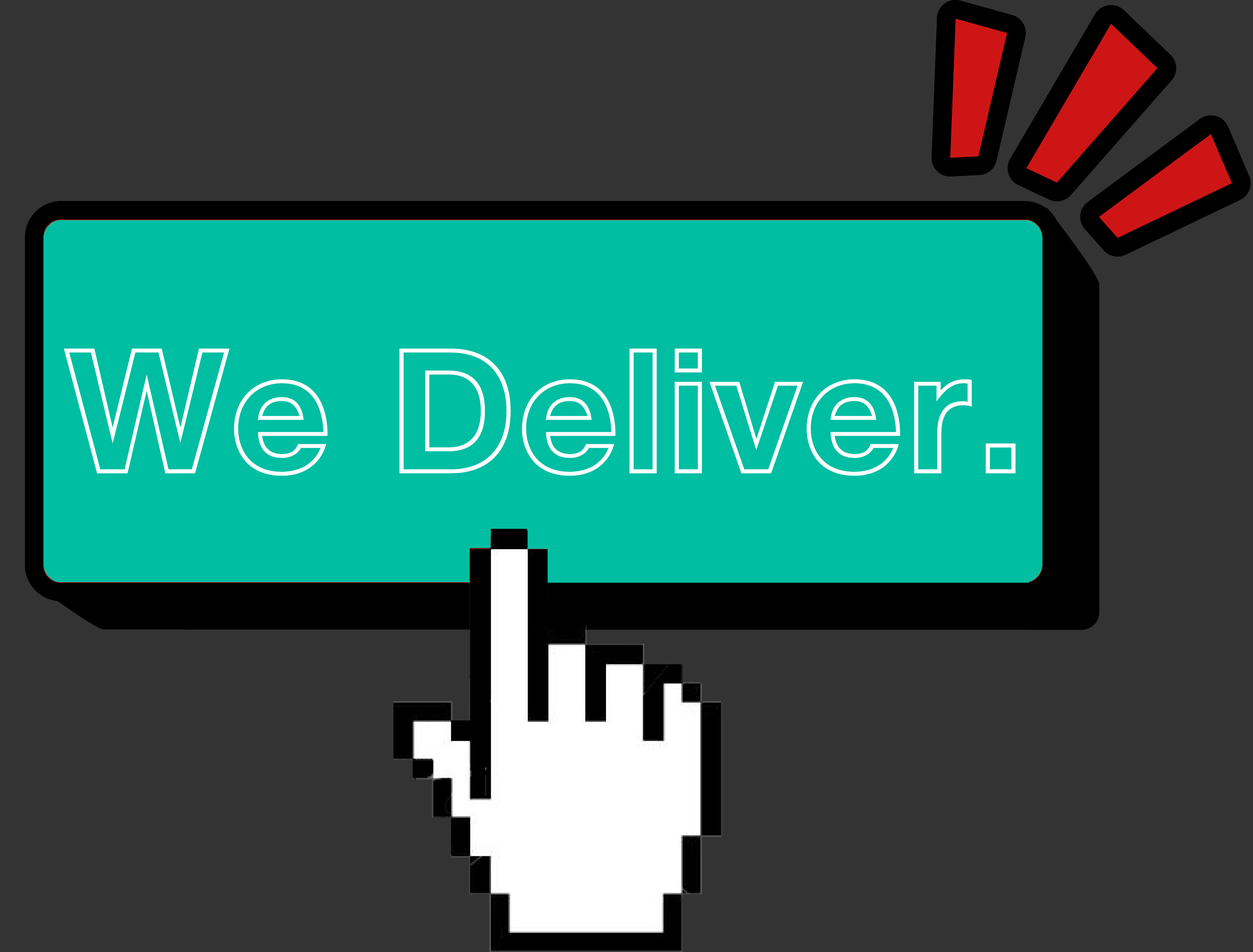
<style>
.page{position:relative;width:1253px;height:952px;background:#333333}
.page>*{position:absolute;margin:0}
.t1{font:174.5px "HelveticaNeue-BoldOutline";color:#ffffff}
</style>
<div class="page">
<p class="t1" style="left:64px;top:348px;width:951px;height:128px">We Deliver.</p>
</div>
